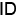
<style>
.page{position:relative;width:16px;height:16px;background:#ffffff}
.page>*{position:absolute;margin:0}
.t1{font:18px "ArialMT";color:#000000}
</style>
<div class="page">
<p class="t1" style="left:0px;top:2px;width:17px;height:13px">ID</p>
</div>
